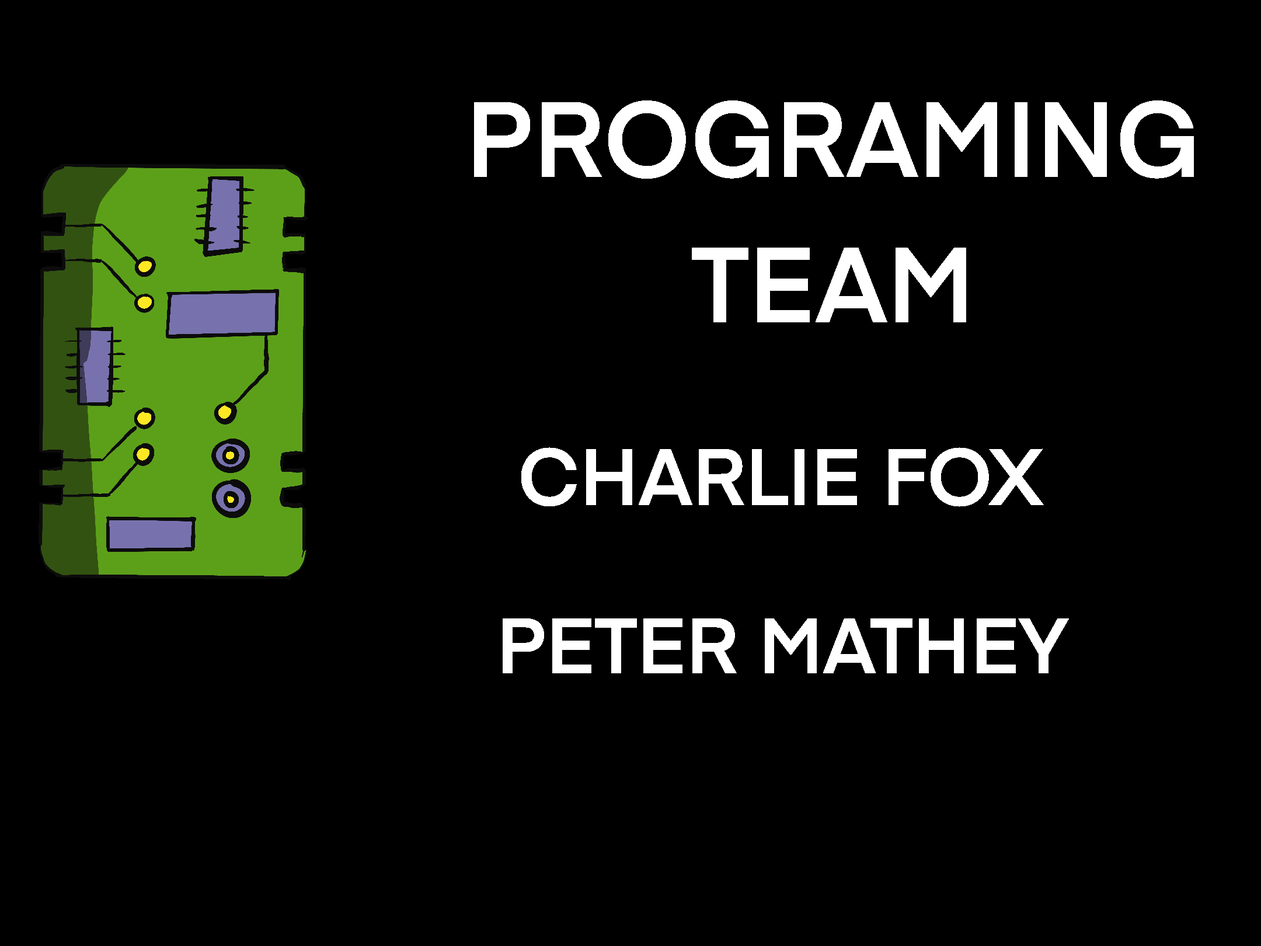
<style>
.page{position:relative;width:1261px;height:946px;background:#000000}
.page>*{position:absolute;margin:0}
.t1{font:105.1px "Eina01-SemiBold";color:#ffffff}
.t2{font:78.9px "Eina01-SemiBold";color:#ffffff}
.t3{font:77.2px "Eina01-SemiBold";color:#ffffff}
</style>
<div class="page">
<p class="t1" style="left:0px;top:0px;width:1261px;height:946px;text-align:center">PROGRAMING TEAM</p>
<p class="t2" style="left:0px;top:0px;width:1261px;height:946px;text-align:center">CHARLIE FOX</p>
<p class="t3" style="left:0px;top:0px;width:1261px;height:946px;text-align:center">PETER MATHEY</p>
</div>
